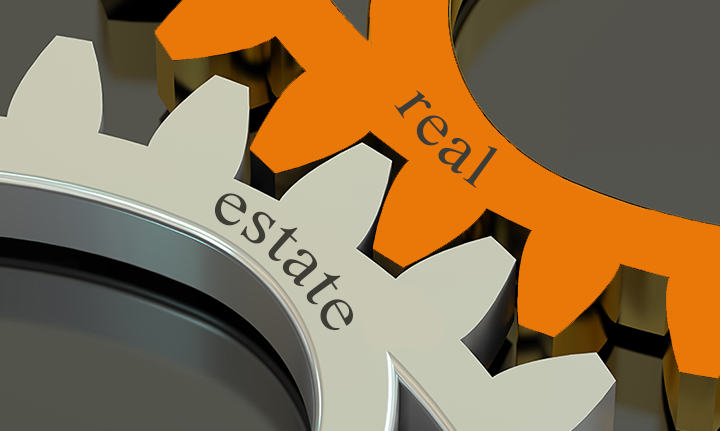
<style>
.page{position:relative;width:720px;height:431px;background:#e97809}
.page>*{position:absolute;margin:0}
.t1{font:62.5px "TimesNewRomanPSMT";letter-spacing:0.033em;color:#3d3d35}
.t2{font:64.6px "TimesNewRomanPSMT";letter-spacing:0.033em;color:#3d3d35}
</style>
<div class="page">
<p class="t1" style="left:394px;top:90px;width:104px;height:98px;rotate:45deg">real</p>
<p class="t2" style="left:214px;top:193px;width:139px;height:138px;rotate:45deg">estate</p>
</div>
